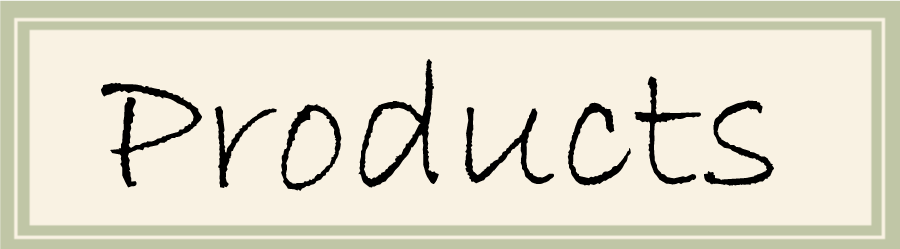
<style>
.page{position:relative;width:900px;height:249px;background:#f9f2e3}
.page>*{position:absolute;margin:0}
.t1{font:187.5px "BradleyHandITC";color:#000000}
</style>
<div class="page">
<p class="t1" style="left:101px;top:59px;width:673px;height:132px">Products</p>
</div>
